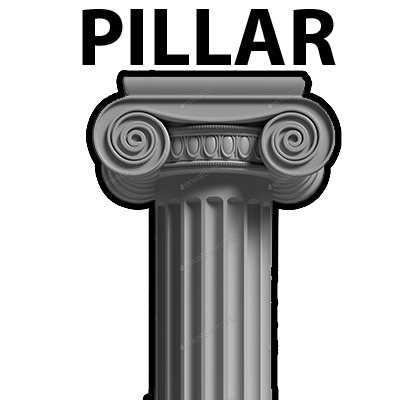
<style>
.page{position:relative;width:400px;height:400px;background:#ffffff}
.page>*{position:absolute;margin:0}
.t1{font:82.4px "MyriadPro-Bold";color:#000000}
</style>
<div class="page">
<p class="t1" style="left:82px;top:9px;width:254px;height:56px">PILLAR</p>
</div>
